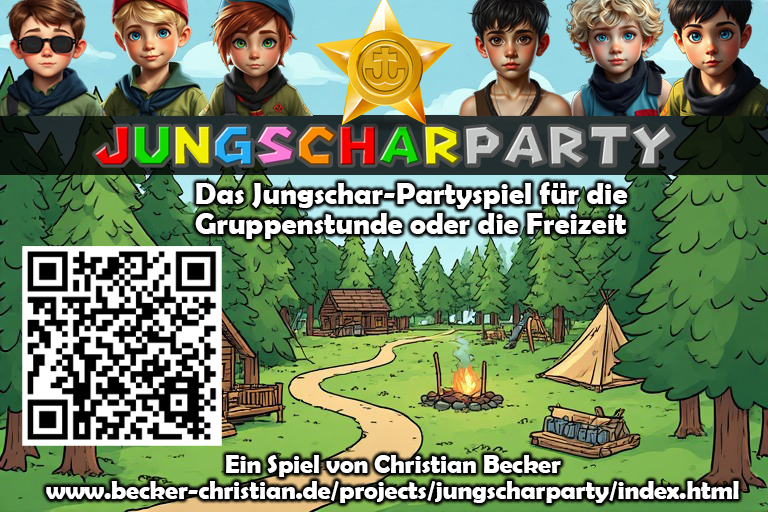
<style>
.page{position:relative;width:768px;height:512px}
.page>*{position:absolute;margin:0}
.t1{font:30px/30px "BerlinSansFBDemi-Bold";color:#ffffff}
.t2{font:25.5px/25.5px "BerlinSansFBDemi-Bold";color:#ffffff}
</style>
<div class="page">
<p class="t1" style="left:195px;top:182px;width:433px;height:57px">Das Jungschar-Partyspiel für die<br>Gruppenstunde oder die Freizeit</p>
<p class="t2" style="left:46px;top:455px;width:693px;height:48px;text-align:center">Ein Spiel von Christian Becker<br>www.becker-christian.de/projects/jungscharparty/index.html</p>
</div>
